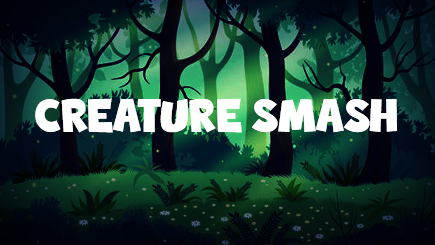
<style>
.page{position:relative;width:435px;height:245px}
.page>*{position:absolute;margin:0}
.t1{font:45.8px "QuickZapRegular";color:#ffffff;text-transform:uppercase}
</style>
<div class="page">
<p class="t1" style="left:35px;top:98px;width:362px;height:35px">CREATURE SMASH</p>
</div>
